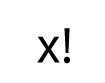
<style>
.page{position:relative;width:105px;height:83px;background:#ffffff}
.page>*{position:absolute;margin:0}
.t1{font:47.9px "DroidSans";color:#000000}
</style>
<div class="page">
<p class="t1" style="left:37px;top:28px;width:33px;height:36px">x!</p>
</div>
